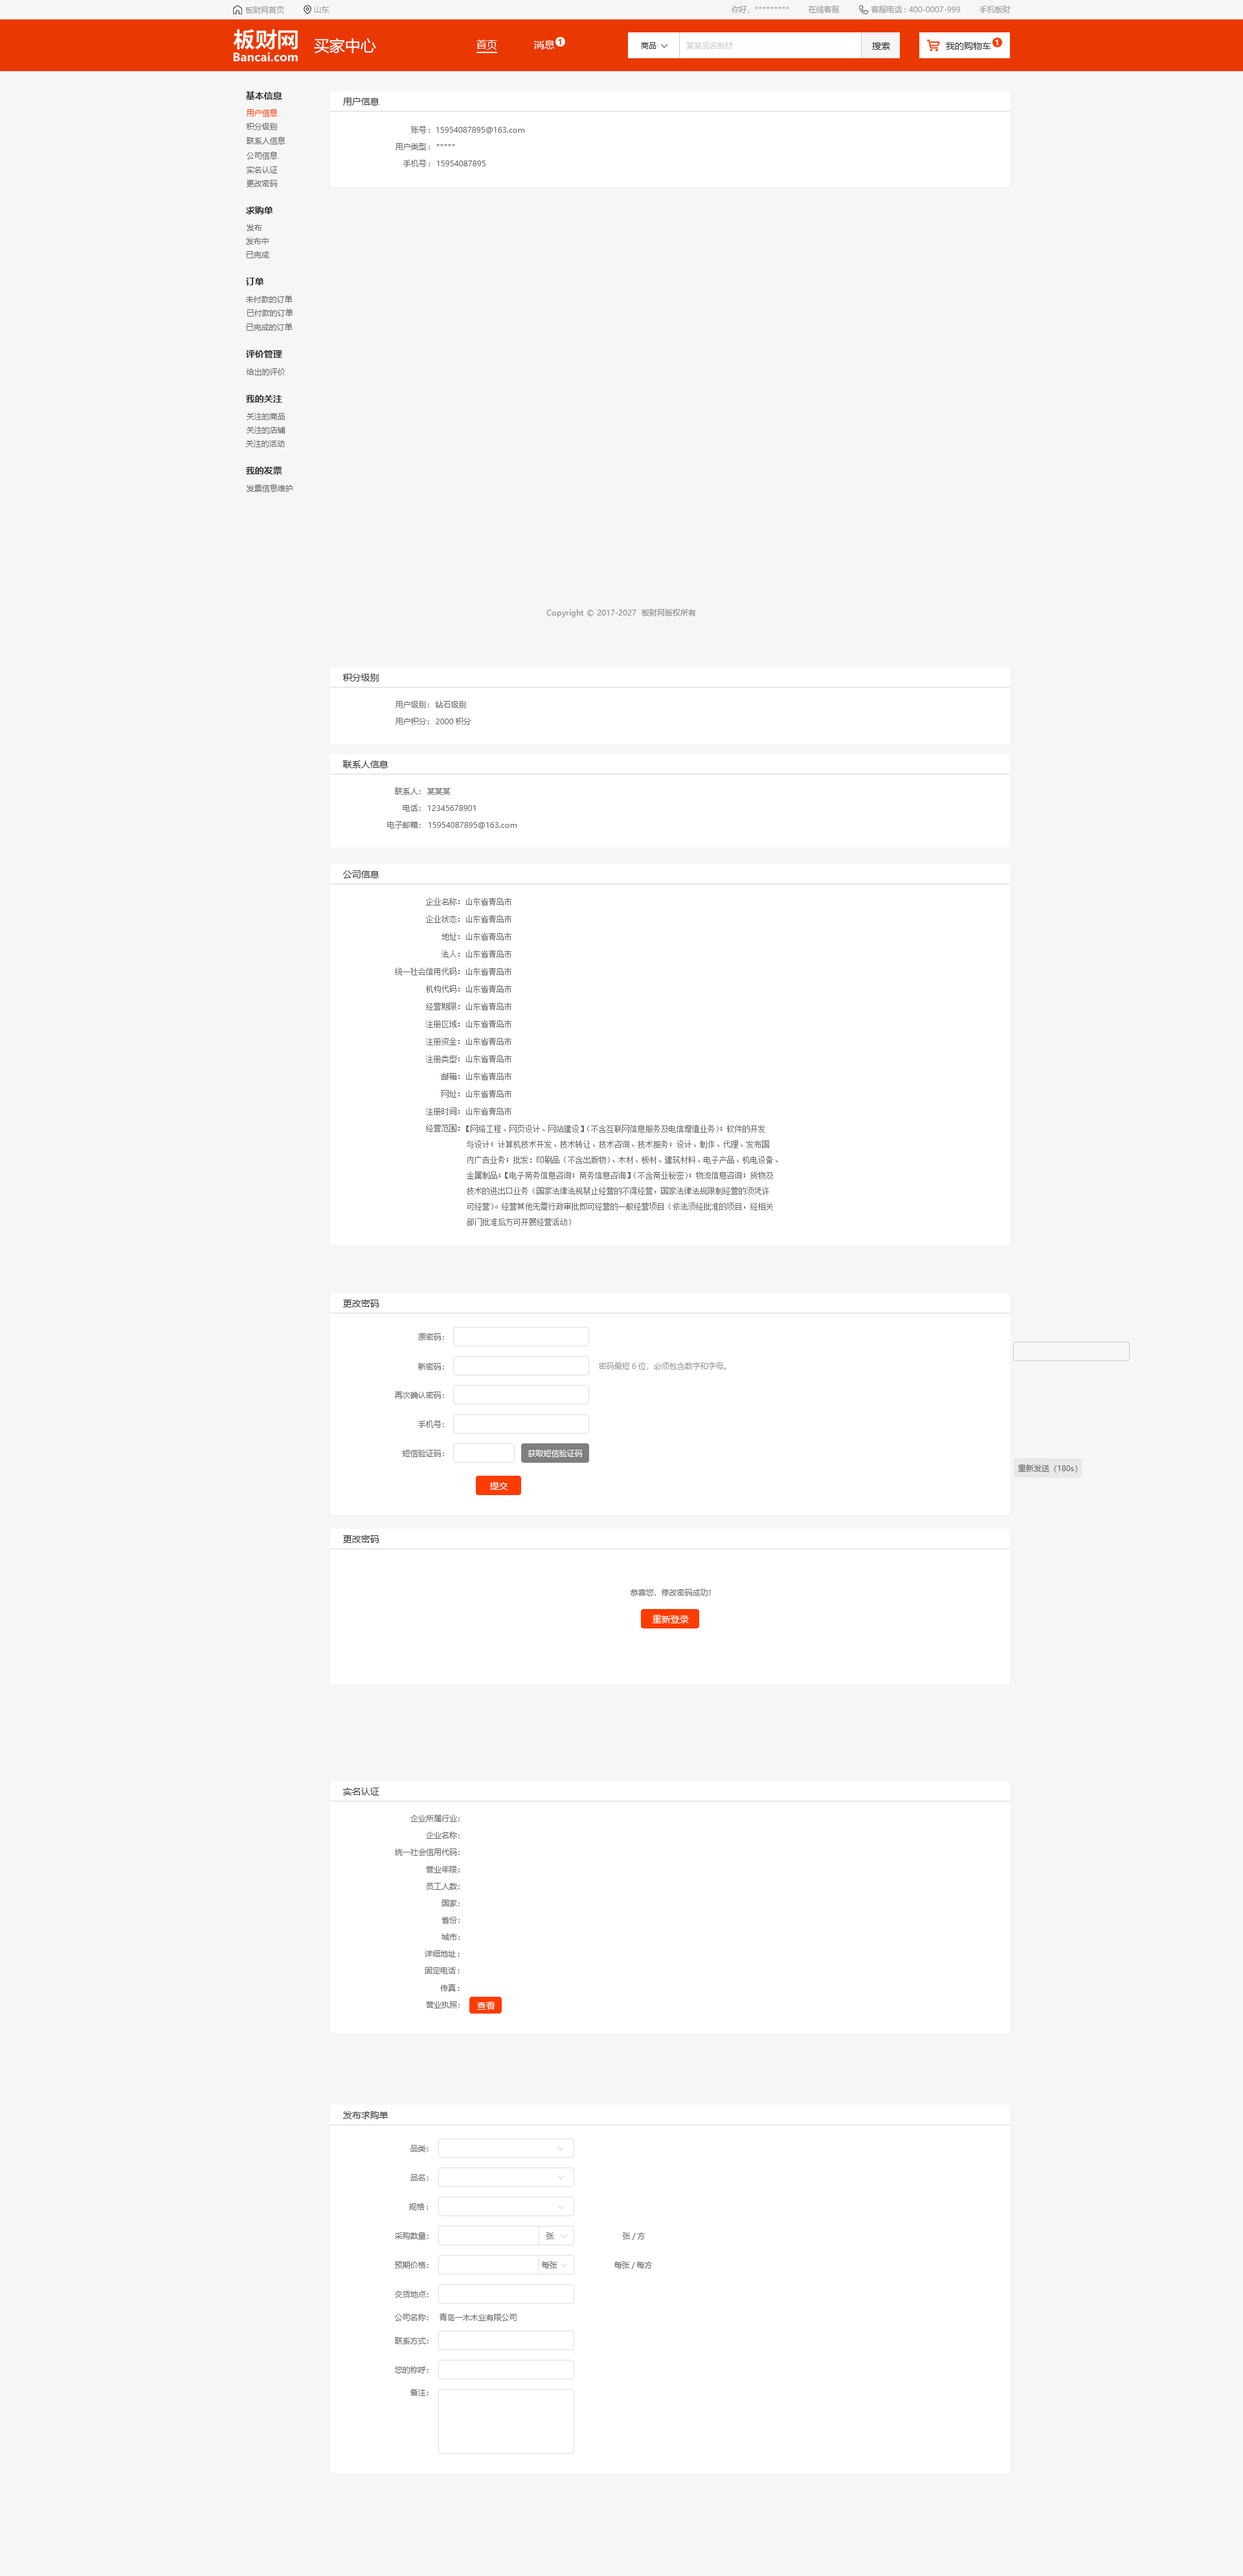
<style>
.page{position:relative;width:1243px;height:2576px;background:#f6f6f6}
.page>*{position:absolute;margin:0}
.t1{font:7.8px "MicrosoftYaHei";color:#999999}
.t2{font:15.5px "MicrosoftYaHei";color:#ffffff}
.t3{font:10.4px "MicrosoftYaHei";color:#ffffff}
.t4{font:7.8px "MicrosoftYaHei-Bold";color:#ea3802}
.t5{font:7.8px "MicrosoftYaHei-Bold";color:#fffefe}
.t6{font:7.8px "MicrosoftYaHei";color:#333333}
.t7{font:7.8px "MicrosoftYaHei";color:#cccccc}
.t8{font:9.1px "MicrosoftYaHei";color:#333333}
.t9{font:9.1px "MicrosoftYaHei-Bold";color:#333333}
.t10{font:7.8px "MicrosoftYaHei";color:#ff3c00}
.t11{font:7.8px "MicrosoftYaHei";color:#666666}
.t12{font:7.8px "MicrosoftYaHei";color:#888888}
.t13{font:7.8px "SimSun";color:#666666}
.t14{font:7.8px/15.5px "SimSun";color:#666666}
.t15{font:7.8px "MicrosoftYaHei";color:#ffffff}
.t16{font:9.1px "MicrosoftYaHei";color:#ffffff}
</style>
<div class="page">
<p class="t1" style="left:314px;top:6px;width:15px;height:7px">山东</p>
<p class="t1" style="left:731px;top:6px;width:58px;height:7px">你好，*********</p>
<p class="t1" style="left:808px;top:6px;width:31px;height:7px">在线客服</p>
<p class="t1" style="left:871px;top:6px;width:89px;height:7px">客服电话: 400-0007-999</p>
<p class="t1" style="left:979px;top:6px;width:31px;height:7px">手机板财</p>
<p class="t1" style="left:245px;top:6px;width:39px;height:8px">板财网首页</p>
<p class="t2" style="left:314px;top:38px;width:62px;height:16px">买家中心</p>
<p class="t3" style="left:476px;top:39px;width:21px;height:11px">首页</p>
<p class="t3" style="left:534px;top:40px;width:21px;height:9px">消息</p>
<p class="t4" style="left:558px;top:39px;width:3px;height:6px">1</p>
<p class="t5" style="left:995px;top:39px;width:3px;height:6px">1</p>
<p class="t6" style="left:641px;top:42px;width:15px;height:7px">商品</p>
<p class="t7" style="left:686px;top:42px;width:47px;height:7px">某某品名板材</p>
<p class="t8" style="left:872px;top:42px;width:18px;height:8px">搜索</p>
<p class="t8" style="left:946px;top:42px;width:45px;height:8px">我的购物车</p>
<p class="t9" style="left:246px;top:91px;width:36px;height:9px">基本信息</p>
<p class="t8" style="left:343px;top:97px;width:36px;height:8px">用户信息</p>
<p class="t10" style="left:247px;top:109px;width:31px;height:8px">用户信息</p>
<p class="t11" style="left:246px;top:123px;width:31px;height:7px">积分级别</p>
<p class="t11" style="left:247px;top:137px;width:38px;height:8px">联系人信息</p>
<p class="t11" style="left:411px;top:126px;width:19px;height:7px">账号:</p>
<p class="t11" style="left:436px;top:127px;width:88px;height:6px">15954087895@163.com</p>
<p class="t11" style="left:395px;top:143px;width:35px;height:7px">用户类型:</p>
<p class="t11" style="left:436px;top:144px;width:19px;height:2px">*****</p>
<p class="t11" style="left:247px;top:151px;width:31px;height:9px">公司信息</p>
<p class="t11" style="left:403px;top:160px;width:27px;height:7px">手机号:</p>
<p class="t11" style="left:436px;top:161px;width:49px;height:5px">15954087895</p>
<p class="t11" style="left:247px;top:166px;width:31px;height:7px">实名认证</p>
<p class="t11" style="left:247px;top:180px;width:31px;height:7px">更改密码</p>
<p class="t9" style="left:246px;top:206px;width:27px;height:8px">求购单</p>
<p class="t11" style="left:247px;top:224px;width:15px;height:7px">发布</p>
<p class="t11" style="left:246px;top:238px;width:23px;height:7px">发布中</p>
<p class="t11" style="left:246px;top:251px;width:23px;height:7px">已完成</p>
<p class="t9" style="left:246px;top:278px;width:18px;height:7px">订单</p>
<p class="t11" style="left:246px;top:295px;width:47px;height:8px">未付款的订单</p>
<p class="t11" style="left:247px;top:309px;width:46px;height:7px">已付款的订单</p>
<p class="t11" style="left:246px;top:323px;width:47px;height:8px">已完成的订单</p>
<p class="t9" style="left:246px;top:350px;width:36px;height:8px">评价管理</p>
<p class="t11" style="left:246px;top:368px;width:39px;height:8px">给出的评价</p>
<p class="t9" style="left:245px;top:395px;width:37px;height:8px">我的关注</p>
<p class="t11" style="left:247px;top:413px;width:38px;height:7px">关注的商品</p>
<p class="t11" style="left:247px;top:427px;width:38px;height:7px">关注的店铺</p>
<p class="t11" style="left:246px;top:440px;width:39px;height:7px">关注的活动</p>
<p class="t9" style="left:245px;top:467px;width:37px;height:7px">我的发票</p>
<p class="t11" style="left:247px;top:484px;width:46px;height:9px">发票信息维护</p>
<p class="t12" style="left:546px;top:609px;width:150px;height:8px">Copyright © 2017-2027  板财网版权所有</p>
<p class="t8" style="left:342px;top:673px;width:37px;height:9px">积分级别</p>
<p class="t11" style="left:395px;top:701px;width:34px;height:7px">用户级别：</p>
<p class="t11" style="left:435px;top:701px;width:31px;height:7px">钻石级别</p>
<p class="t11" style="left:395px;top:718px;width:34px;height:7px">用户积分：</p>
<p class="t11" style="left:436px;top:718px;width:35px;height:7px">2000积分</p>
<p class="t8" style="left:343px;top:761px;width:45px;height:7px">联系人信息</p>
<p class="t11" style="left:395px;top:788px;width:26px;height:7px">联系人：</p>
<p class="t11" style="left:427px;top:788px;width:23px;height:7px">某某某</p>
<p class="t11" style="left:403px;top:805px;width:18px;height:7px">电话：</p>
<p class="t11" style="left:427px;top:805px;width:49px;height:6px">12345678901</p>
<p class="t11" style="left:387px;top:821px;width:34px;height:7px">电子邮箱：</p>
<p class="t11" style="left:428px;top:822px;width:88px;height:6px">15954087895@163.com</p>
<p class="t8" style="left:343px;top:871px;width:36px;height:7px">公司信息</p>
<p class="t13" style="left:426px;top:898px;width:34px;height:7px">企业名称：</p>
<p class="t13" style="left:466px;top:898px;width:45px;height:7px">山东省青岛市</p>
<p class="t13" style="left:426px;top:915px;width:34px;height:8px">企业状态：</p>
<p class="t13" style="left:466px;top:915px;width:45px;height:8px">山东省青岛市</p>
<p class="t13" style="left:441px;top:933px;width:19px;height:7px">地址：</p>
<p class="t13" style="left:466px;top:933px;width:45px;height:7px">山东省青岛市</p>
<p class="t13" style="left:441px;top:950px;width:19px;height:8px">法人：</p>
<p class="t13" style="left:466px;top:950px;width:45px;height:8px">山东省青岛市</p>
<p class="t13" style="left:395px;top:968px;width:65px;height:7px">统一社会信用代码：</p>
<p class="t13" style="left:466px;top:968px;width:45px;height:7px">山东省青岛市</p>
<p class="t13" style="left:426px;top:985px;width:34px;height:8px">机构代码：</p>
<p class="t13" style="left:466px;top:985px;width:45px;height:8px">山东省青岛市</p>
<p class="t13" style="left:426px;top:1003px;width:34px;height:7px">经营期限：</p>
<p class="t13" style="left:466px;top:1003px;width:45px;height:7px">山东省青岛市</p>
<p class="t13" style="left:426px;top:1020px;width:34px;height:8px">注册区域：</p>
<p class="t13" style="left:466px;top:1020px;width:45px;height:8px">山东省青岛市</p>
<p class="t13" style="left:426px;top:1038px;width:34px;height:7px">注册资金：</p>
<p class="t13" style="left:466px;top:1038px;width:45px;height:7px">山东省青岛市</p>
<p class="t13" style="left:426px;top:1055px;width:34px;height:8px">注册类型：</p>
<p class="t13" style="left:466px;top:1055px;width:45px;height:8px">山东省青岛市</p>
<p class="t13" style="left:441px;top:1072px;width:19px;height:8px">邮箱：</p>
<p class="t13" style="left:466px;top:1072px;width:45px;height:8px">山东省青岛市</p>
<p class="t13" style="left:441px;top:1090px;width:19px;height:8px">网址：</p>
<p class="t13" style="left:466px;top:1090px;width:45px;height:8px">山东省青岛市</p>
<p class="t13" style="left:426px;top:1107px;width:34px;height:8px">注册时间：</p>
<p class="t13" style="left:466px;top:1107px;width:45px;height:8px">山东省青岛市</p>
<p class="t13" style="left:426px;top:1124px;width:34px;height:8px">经营范围：</p>
<p class="t14" style="left:466px;top:1125px;width:311px;height:101px">【网络工程、网页设计、网站建设】（不含互联网信息服务及电信增值业务）；软件的开发<br>          与设计；计算机技术开发、技术转让、技术咨询、技术服务；设计、制作、代理、发布国<br>          内广告业务；批发：印刷品（不含出版物）、木材、板材、建筑材料、电子产品、机电设备、<br>          金属制品；【电子商务信息咨询；商务信息咨询】（不含商业秘密）；物流信息咨询；货物及<br>          技术的进出口业务（国家法律法规禁止经营的不得经营，国家法律法规限制经营的须凭许<br>          可经营）。经营其他无需行政审批即可经营的一般经营项目（依法须经批准的项目，经相关<br>          部门批准后方可开展经营活动）</p>
<p class="t8" style="left:343px;top:1300px;width:36px;height:7px">更改密码</p>
<p class="t11" style="left:418px;top:1333px;width:26px;height:7px">原密码：</p>
<p class="t1" style="left:599px;top:1362px;width:127px;height:8px">密码最短6位，必须包含数字和字母。</p>
<p class="t11" style="left:417px;top:1362px;width:27px;height:8px">新密码：</p>
<p class="t11" style="left:394px;top:1392px;width:50px;height:7px">再次确认密码：</p>
<p class="t11" style="left:417px;top:1421px;width:27px;height:7px">手机号：</p>
<p class="t11" style="left:402px;top:1450px;width:42px;height:8px">短信验证码：</p>
<p class="t15" style="left:527px;top:1450px;width:56px;height:8px">获取短信验证码</p>
<p class="t11" style="left:1017px;top:1464px;width:60px;height:8px">重新发送（180s）</p>
<p class="t16" style="left:490px;top:1482px;width:18px;height:8px">提交</p>
<p class="t8" style="left:343px;top:1535px;width:36px;height:8px">更改密码</p>
<p class="t11" style="left:630px;top:1588px;width:81px;height:8px">恭喜您，修改密码成功！</p>
<p class="t16" style="left:652px;top:1615px;width:37px;height:8px">重新登录</p>
<p class="t8" style="left:343px;top:1788px;width:36px;height:7px">实名认证</p>
<p class="t11" style="left:410px;top:1815px;width:50px;height:7px">企业所属行业：</p>
<p class="t11" style="left:426px;top:1832px;width:34px;height:7px">企业名称：</p>
<p class="t11" style="left:395px;top:1849px;width:65px;height:7px">统一社会信用代码：</p>
<p class="t11" style="left:426px;top:1866px;width:34px;height:7px">营业年限：</p>
<p class="t11" style="left:426px;top:1883px;width:34px;height:7px">员工人数：</p>
<p class="t11" style="left:441px;top:1900px;width:19px;height:7px">国家：</p>
<p class="t11" style="left:441px;top:1916px;width:19px;height:8px">省份：</p>
<p class="t11" style="left:441px;top:1933px;width:19px;height:7px">城市：</p>
<p class="t11" style="left:425px;top:1950px;width:35px;height:7px">详细地址:</p>
<p class="t11" style="left:425px;top:1967px;width:35px;height:7px">固定电话:</p>
<p class="t11" style="left:440px;top:1984px;width:20px;height:8px">传真:</p>
<p class="t11" style="left:426px;top:2001px;width:34px;height:7px">营业执照：</p>
<p class="t16" style="left:477px;top:2002px;width:18px;height:8px">查看</p>
<p class="t8" style="left:343px;top:2111px;width:45px;height:8px">发布求购单</p>
<p class="t11" style="left:410px;top:2145px;width:18px;height:7px">品类：</p>
<p class="t11" style="left:410px;top:2174px;width:18px;height:7px">品名：</p>
<p class="t11" style="left:409px;top:2203px;width:19px;height:7px">规格:</p>
<p class="t11" style="left:395px;top:2232px;width:33px;height:7px">采购数量：</p>
<p class="t11" style="left:546px;top:2232px;width:8px;height:7px">张</p>
<p class="t11" style="left:623px;top:2232px;width:22px;height:8px">张/方</p>
<p class="t11" style="left:394px;top:2261px;width:34px;height:8px">预期价格：</p>
<p class="t11" style="left:541px;top:2261px;width:16px;height:8px">每张</p>
<p class="t11" style="left:614px;top:2261px;width:38px;height:8px">每张/每方</p>
<p class="t11" style="left:395px;top:2291px;width:33px;height:7px">交货地点：</p>
<p class="t11" style="left:395px;top:2314px;width:33px;height:7px">公司名称：</p>
<p class="t11" style="left:439px;top:2313px;width:77px;height:8px">青岛一木木业有限公司</p>
<p class="t11" style="left:395px;top:2337px;width:33px;height:7px">联系方式：</p>
<p class="t11" style="left:395px;top:2366px;width:33px;height:7px">您的称呼：</p>
<p class="t11" style="left:410px;top:2389px;width:18px;height:7px">备注：</p>
</div>
